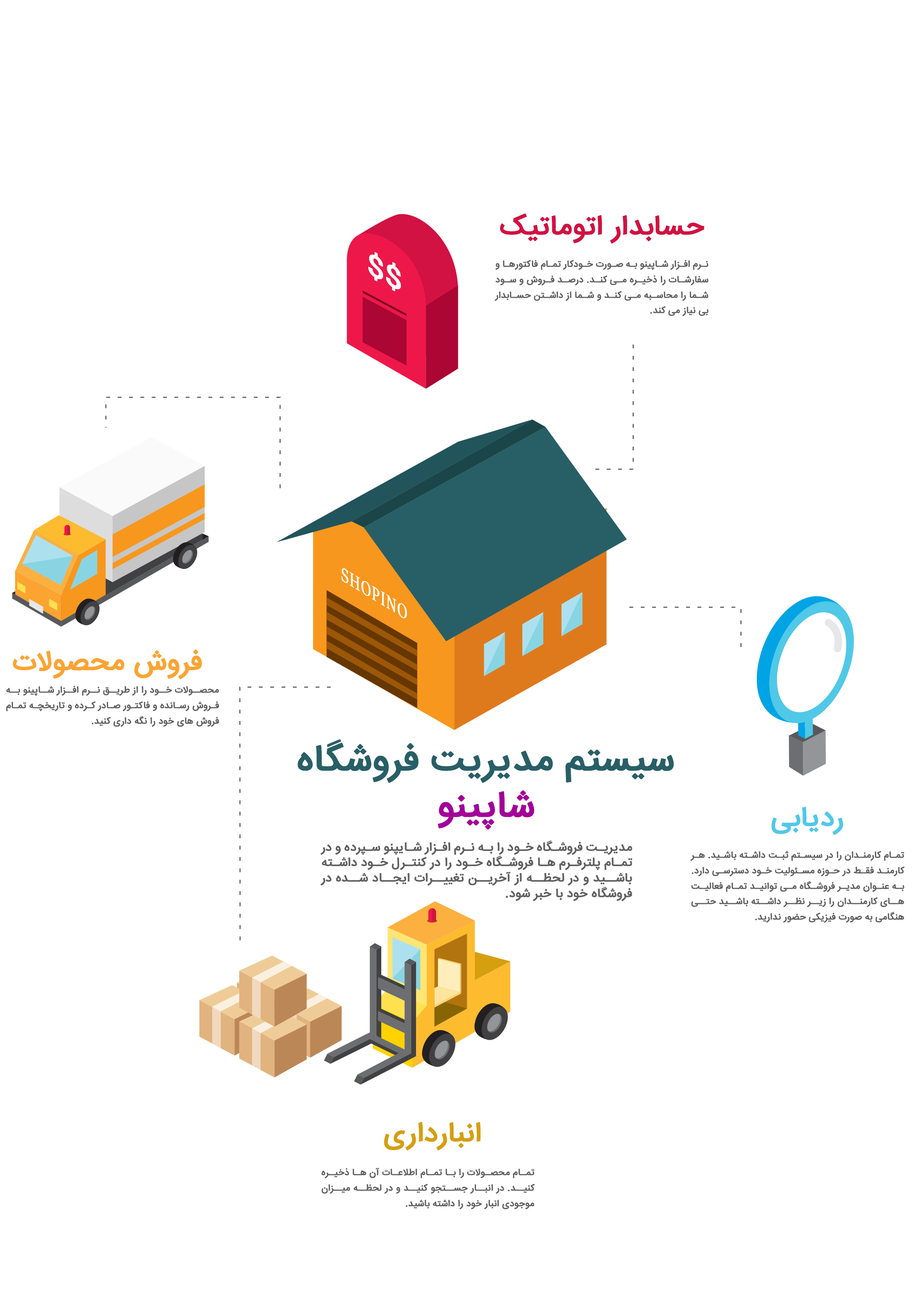
<style>
.page{position:relative;width:918px;height:1299px;background:#ffffff}
.page>*{position:absolute;margin:0}
.t1{font:27.8px "IRANSans-Medium";color:#d11242;text-transform:uppercase;font-weight:bold}
.t2{font:27.8px "IRANSans-Medium";color:#ffffff;text-transform:uppercase;font-weight:bold;scale:1.15 1}
.t3{font:9.3px/15.4px "IRANSans-Medium";color:#616161;text-transform:uppercase;font-weight:bold}
.t4{font:21.6px "SitkaBanner";color:#ffffff;text-transform:uppercase;font-weight:bold;scale:0.85 1}
.t5{font:27.8px "IRANSans-Medium";color:#fba432;text-transform:uppercase;font-weight:bold}
.t6{font:37px/46.3px "IRANSans-Medium";color:#285f66;text-transform:uppercase;font-weight:bold}
.t7{font:37px/46.3px "IRANSans-Medium";color:#a30099;text-transform:uppercase;font-weight:bold}
.t8{font:27.8px "IRANSans-Medium";color:#50c8e8;text-transform:uppercase;font-weight:bold}
.t9{font:12.3px/15.4px "IRANSans-Medium";color:#616161;text-transform:uppercase;font-weight:bold}
.t10{font:27.8px "IRANSans-Medium";color:#d59f0f;text-transform:uppercase;font-weight:bold}
</style>
<div class="page">
<p class="t1" style="left:500px;top:213px;width:205px;height:31px">حسابدار اتوماتیک</p>
<p class="t2" style="left:368px;top:252px;width:33px;height:39px;rotate:29deg">$$</p>
<p class="t3" style="left:495px;top:260px;width:214px;height:56px;text-align:justify">نرم افزار شاپینو به صورت خودکار تمام فاکتورها و سفارشات را ذخیره می کند. درصد فروش و سود شما را محاسبه می کند و شما از داشتن حسابدار بی نیاز می کند.</p>
<p class="t4" style="left:341px;top:568px;width:66px;height:50px;rotate:31deg">shopino</p>
<p class="t5" style="left:13px;top:649px;width:189px;height:30px">فروش محصولات</p>
<p class="t3" style="left:6px;top:686px;width:213px;height:41px;text-align:justify">محصولات خود را از طریق نرم افزار شاپینو به فروش رسانده و فاکتور صادر کرده و تاریخچه تمام فروش های خود را نگه داری کنید.</p>
<p class="t6" style="left:298px;top:739px;width:376px;height:90px;text-align:center">سیستم مدیریت فروشگاه<br><span class="t7">شاپینو</span></p>
<p class="t8" style="left:772px;top:806px;width:71px;height:29px">ردیابی</p>
<p class="t9" style="left:320px;top:840px;width:313px;height:61px;text-align:justify">مدیریت فروشگاه خود را به نرم افزار شایپنو سپرده و در تمام پلترفرم ها فروشگاه خود را در کنترل خود داشته باشید و در لحظه از آخرین تغییرات ایجاد شده در فروشگاه خود با خبر شود.</p>
<p class="t3" style="left:690px;top:850px;width:215px;height:73px;text-align:justify">تمام کارمندان را در سیستم ثبت داشته باشید. هر کارمند فقط در حوزه مسئولیت خود دسترسی دارد. به عنوان مدیر فروشگاه می توانید تمام فعالیت های کارمندان را زیر نظر داشته باشید حتی هنگامی به صورت فیزیکی حضور ندارید.</p>
<p class="t10" style="left:384px;top:1122px;width:97px;height:28px">انبارداری</p>
<p class="t3" style="left:321px;top:1167px;width:214px;height:42px;text-align:justify">تمام محصولات را با تمام اطلاعات آن ها ذخیره کنید. در انبار جستجو کنید و در لحظه میزان موجودی انبار خود را داشته باشید.</p>
</div>
